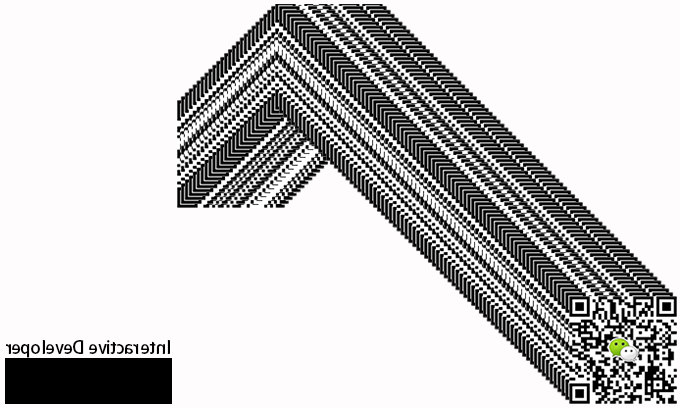
<style>
.page{position:relative;width:680px;height:408px;background:#fefcfc}
.page>*{position:absolute;margin:0}
.t1{font:17.2px "AdobeHeitiStd-Regular";color:#000000}
</style>
<div class="page">
<p class="t1" style="left:6px;top:340px;width:164px;height:18px;rotate:180deg">Interactive Developer</p>
</div>
